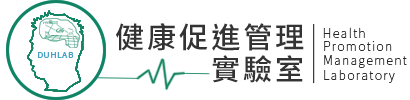
<style>
.page{position:relative;width:410px;height:100px;background:#ffffff}
.page>*{position:absolute;margin:0}
.t1{font:29.2px "NotoSansCJKtc-Medium";letter-spacing:0.1em;color:#333333}
.t2{font:12.5px "NotoSansCJKtc-Thin";letter-spacing:0.1em;color:#292929}
.t3{font:8px "NotoSansCJKtc-Medium";letter-spacing:0.1em;color:#48a1c7}
</style>
<div class="page">
<p class="t1" style="left:116px;top:23px;width:188px;height:28px">健康促進管理</p>
<p class="t2" style="left:323px;top:27px;width:42px;height:11px">Health</p>
<p class="t2" style="left:324px;top:41px;width:68px;height:10px">Promotion</p>
<p class="t3" style="left:38px;top:52px;width:36px;height:6px">DUHLAB</p>
<p class="t1" style="left:212px;top:55px;width:91px;height:28px">實驗室</p>
<p class="t2" style="left:324px;top:55px;width:83px;height:13px">Management</p>
<p class="t2" style="left:324px;top:69px;width:71px;height:14px">Laboratory</p>
</div>
